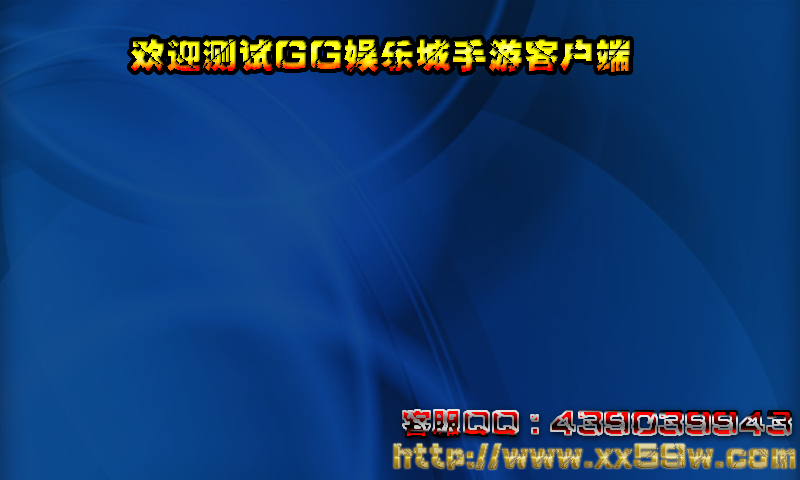
<style>
.page{position:relative;width:800px;height:480px}
.page>*{position:absolute;margin:0}
.t1{font:36px "PiliEG-Ultra-GB"}
.t2{font:30px "PiliEG-Ultra-GB"}
</style>
<div class="page">
<p class="t1" style="left:131px;top:38px;width:499px;height:34px">欢迎测试GG娱乐城手游客户端</p>
<p class="t2" style="left:403px;top:410px;width:388px;height:27px">客服QQ：439039943</p>
<p class="t2" style="left:394px;top:444px;width:401px;height:25px">http://www.xx59w.com</p>
</div>
